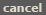
<style>
.page{position:relative;width:46px;height:15px;background:#5a5a5a}
.page>*{position:absolute;margin:0}
.t1{font:11px "Verdana-Bold";color:#dedbcb}
</style>
<div class="page">
<p class="t1" style="left:3px;top:3px;width:39px;height:9px">cancel</p>
</div>
